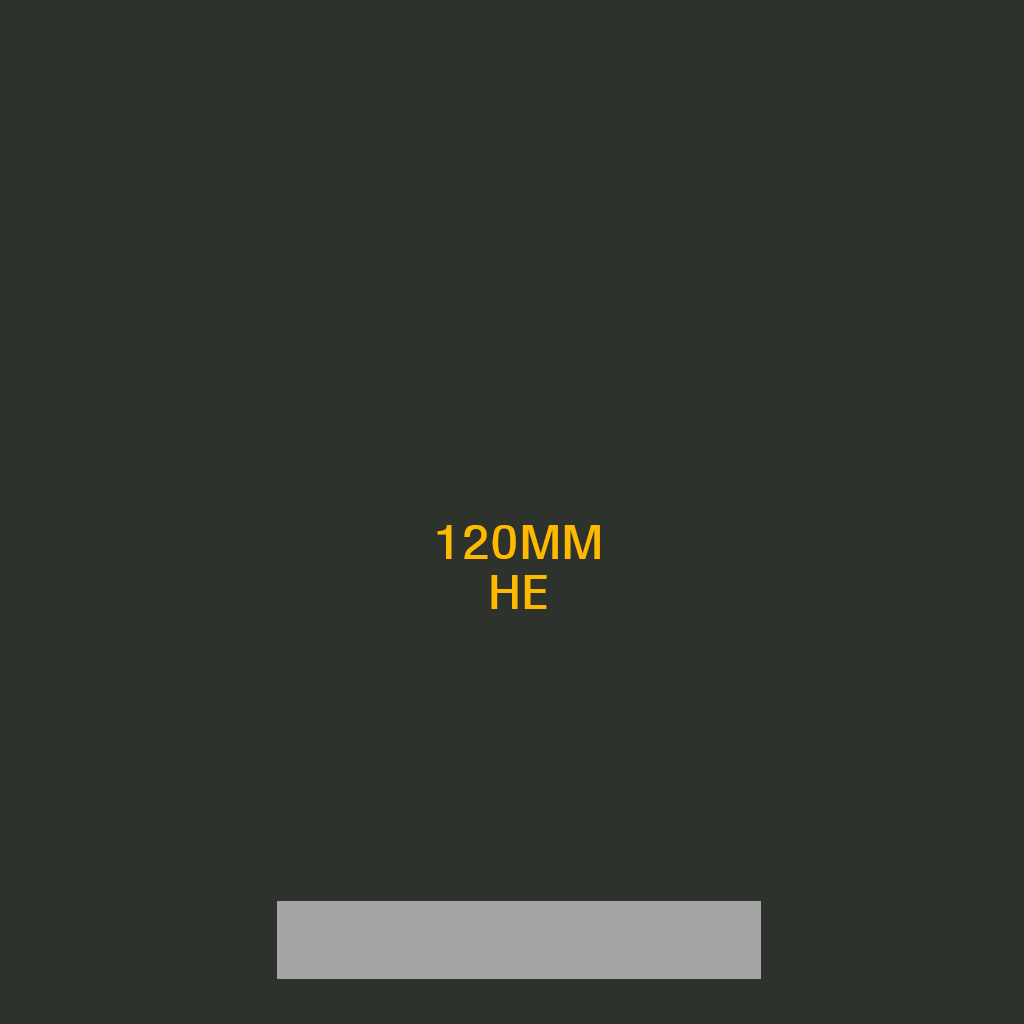
<style>
.page{position:relative;width:1024px;height:1024px;background:#2d322c}
.page>*{position:absolute;margin:0}
.t1{font:42px "MoeumTR-HM";color:#ffba00;scale:1.23 1}
</style>
<div class="page">
<p class="t1" style="left:437px;top:525px;width:163px;height:84px;text-align:center">120MM<br>HE</p>
</div>
